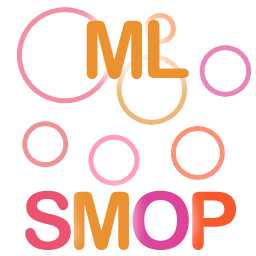
<style>
.page{position:relative;width:256px;height:256px;background:#ffffff}
.page>*{position:absolute;margin:0}
.t1{font:80px "ArialRoundedMTBold";letter-spacing:-0.075em;color:#eb9130}
.t2{font:80px "ArialRoundedMTBold";letter-spacing:-0.075em;color:#ec5370}
.t3{font:80px "ArialRoundedMTBold";letter-spacing:-0.075em;color:#dd4497}
.t4{font:80px "ArialRoundedMTBold";letter-spacing:-0.075em;color:#f9592e}
</style>
<div class="page">
<p class="t1" style="left:86px;top:19px;width:103px;height:60px">ML</p>
<p class="t2" style="left:25px;top:190px;width:46px;height:60px">S</p>
<p class="t1" style="left:73px;top:191px;width:56px;height:59px">M</p>
<p class="t3" style="left:132px;top:190px;width:57px;height:60px">O</p>
<p class="t4" style="left:192px;top:191px;width:44px;height:59px">P</p>
</div>
